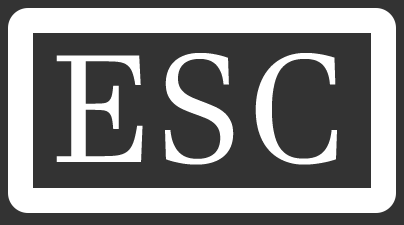
<style>
.page{position:relative;width:404px;height:225px;background:#333333}
.page>*{position:absolute;margin:0}
.t1{font:150px "JavaneseText";letter-spacing:0.035em;color:#ffffff}
</style>
<div class="page">
<p class="t1" style="left:56px;top:53px;width:281px;height:112px">ESC</p>
</div>
